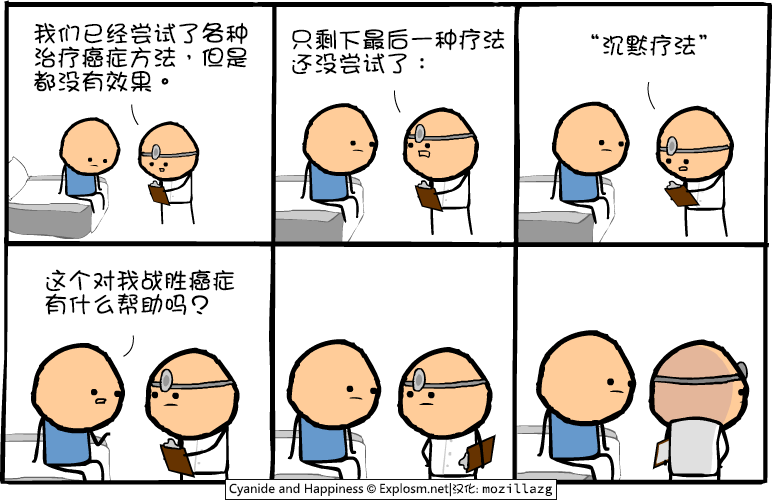
<style>
.page{position:relative;width:772px;height:500px;background:#ffffff}
.page>*{position:absolute;margin:0}
.t1{font:24px/24px "DFGirl";color:#000000}
.t2{font:24px "DFGirl";color:#000000}
</style>
<div class="page">
<p class="t1" style="left:34px;top:22px;width:214px;height:70px">我们已经尝试了各种<br>治疗癌症方法，但是<br>都没有效果。</p>
<p class="t1" style="left:292px;top:28px;width:213px;height:46px">只剩下最后一种疗法<br>还没尝试了：</p>
<p class="t2" style="left:591px;top:34px;width:116px;height:22px">“沉默疗法”</p>
<p class="t1" style="left:45px;top:269px;width:190px;height:46px">这个对我战胜癌症<br>有什么帮助吗？</p>
</div>
